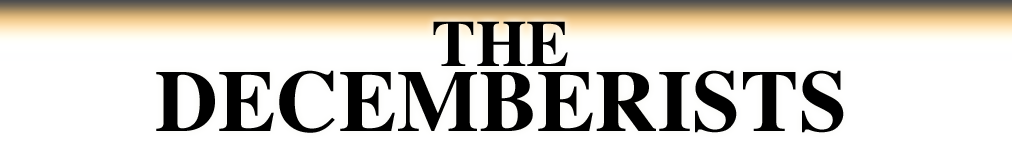
<style>
.page{position:relative;width:1012px;height:145px;background:#ffffff}
.page>*{position:absolute;margin:0}
.t1{font:87.2px/65.4px "Times-Bold";color:#000000}
.t2{font:65.4px "Times-Bold";color:#000000}
</style>
<div class="page">
<p class="t1" style="left:156px;top:21px;width:688px;height:112px;text-align:center"><span class="t2">THE<br></span>DECEMBERISTS</p>
</div>
